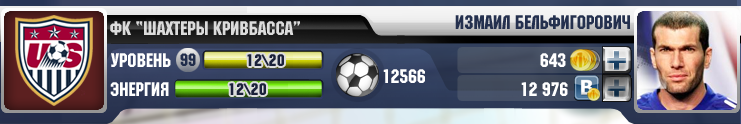
<style>
.page{position:relative;width:741px;height:124px}
.page>*{position:absolute;margin:0}
.t1{font:19.5px "MachineCTT";color:#24304e}
.t2{font:19.5px "MachineCTT";color:#dcdcdc}
.t3{font:19.5px "MachineCTT";color:#ffffff}
.t4{font:17.7px "MachineCTT";color:#202c4a}
.t5{font:16.9px "MachineCTT";letter-spacing:0.04em;color:#1b213a}
</style>
<div class="page">
<p class="t1" style="left:455px;top:15px;width:175px;height:14px">Измаил Бельфигорович</p>
<p class="t2" style="left:110px;top:21px;width:190px;height:14px">фк “ШАХТЕРЫ КРИВБАССА”</p>
<p class="t3" style="left:111px;top:53px;width:60px;height:14px">УРОВЕНЬ</p>
<p class="t4" style="left:180px;top:53px;width:16px;height:13px">99</p>
<p class="t5" style="left:247px;top:54px;width:37px;height:12px">12\20</p>
<p class="t3" style="left:540px;top:53px;width:26px;height:14px">643</p>
<p class="t3" style="left:383px;top:69px;width:42px;height:14px">12566</p>
<p class="t3" style="left:110px;top:82px;width:59px;height:14px">эНЕРГИЯ</p>
<p class="t5" style="left:229px;top:83px;width:37px;height:12px">12\20</p>
<p class="t3" style="left:521px;top:82px;width:47px;height:14px">12 976</p>
</div>
